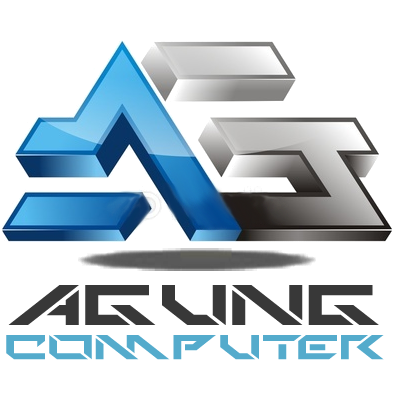
<style>
.page{position:relative;width:394px;height:394px;background:#ffffff}
.page>*{position:absolute;margin:0}
.t1{font:48.4px/34.2px "TechnoHideo";letter-spacing:0.01em;scale:1.28 1}
.t2{font:79.3px/34.2px "TechnoHideo";letter-spacing:0.01em;scale:1.28 1}
</style>
<div class="page">
<p class="t1" style="left:6px;top:285px;width:378px;height:75px;text-align:center"><span class="t2">AGUNG<br></span>COMPUTER</p>
</div>
